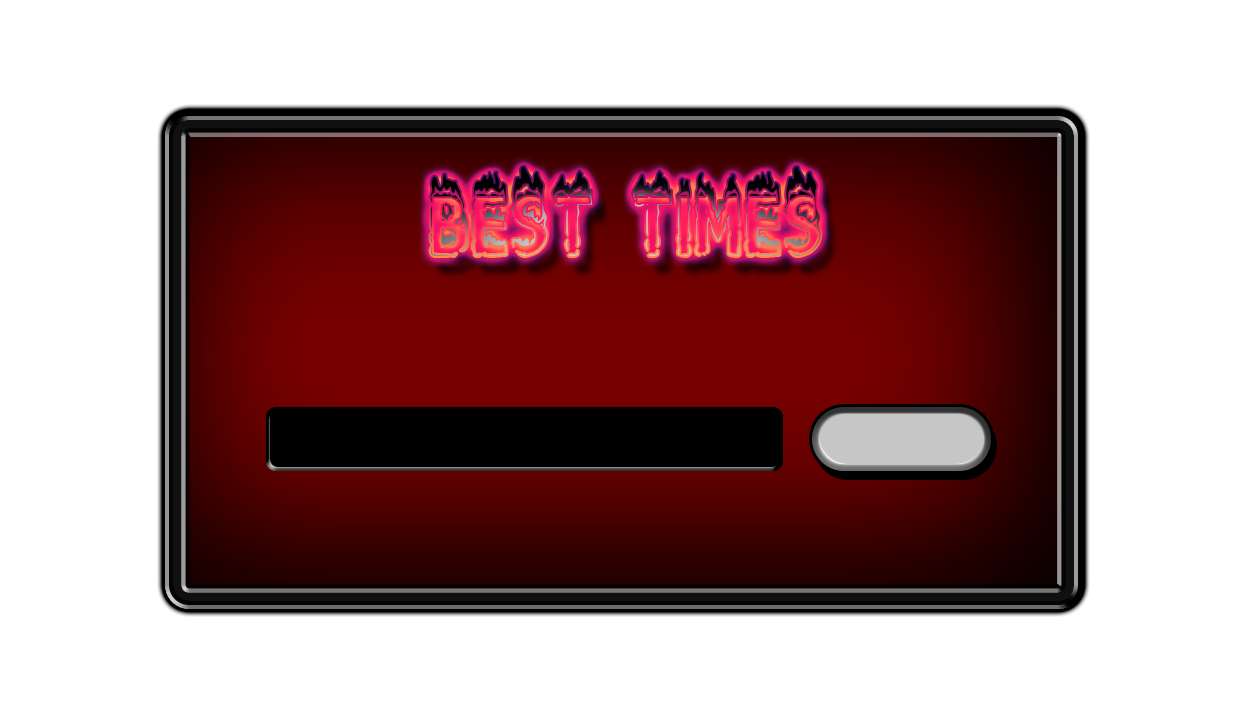
<style>
.page{position:relative;width:1250px;height:720px;background:#ffffff}
.page>*{position:absolute;margin:0}
.t1{font:70.5px "PlasticExplosive"}
</style>
<div class="page">
<p class="t1" style="left:430px;top:167px;width:391px;height:89px">BEST TIMES</p>
</div>
